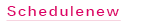
<style>
.page{position:relative;width:146px;height:24px;background:#ffffff}
.page>*{position:absolute;margin:0}
.t1{font:14px "Kalinga-Bold";letter-spacing:0.12em;color:#dd006a;text-decoration:underline}
</style>
<div class="page">
<p class="t1" style="left:6px;top:6px;width:115px;height:15px">Schedulenew</p>
</div>
